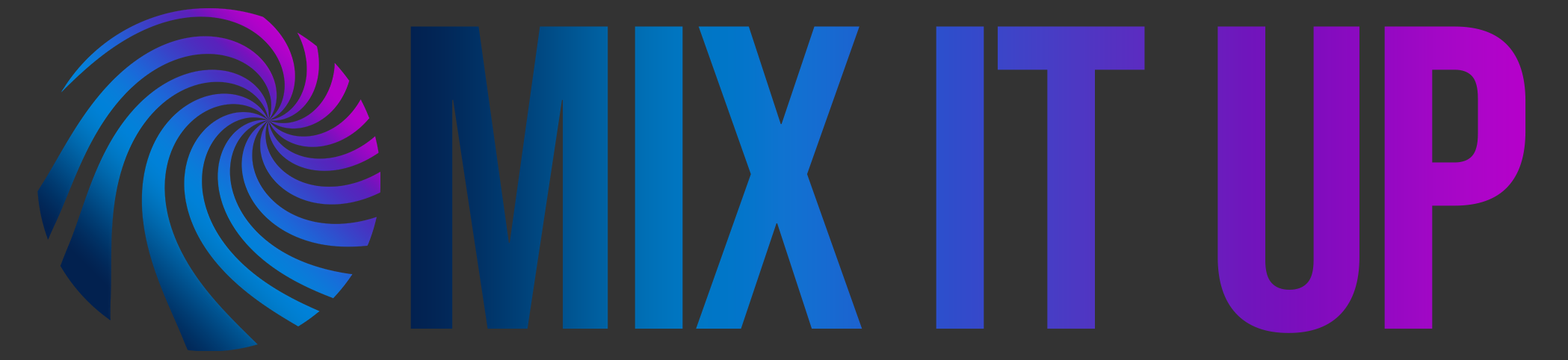
<style>
.page{position:relative;width:1568px;height:360px;background:#333333}
.page>*{position:absolute;margin:0}
.t1{font:431.8px "BebasNeue-Regular";letter-spacing:-0.02em}
</style>
<div class="page">
<p class="t1" style="left:410px;top:26px;width:1116px;height:307px">Mix It Up</p>
</div>
